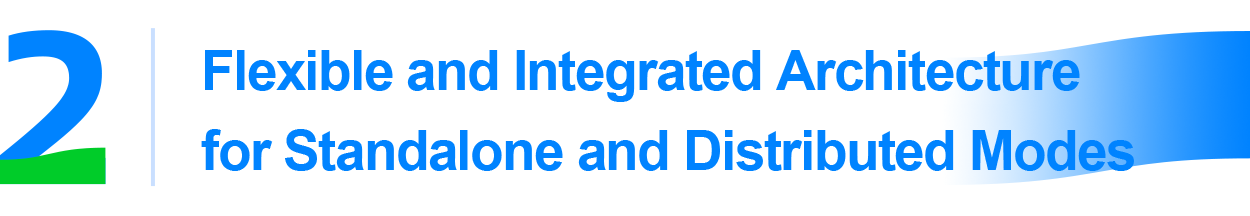
<style>
.page{position:relative;width:1250px;height:216px;background:#ffffff}
.page>*{position:absolute;margin:0}
.t1{font:55px/80px "Arial-BoldMT";letter-spacing:-0.03em;color:#0083ff}
</style>
<div class="page">
<p class="t1" style="left:201px;top:50px;width:933px;height:121px">Flexible and Integrated Architecture for Standalone and Distributed Modes</p>
</div>
